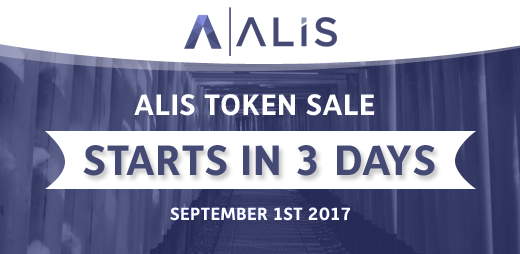
<style>
.page{position:relative;width:520px;height:254px;background:#ffffff}
.page>*{position:absolute;margin:0}
.t1{font:30px "Depot-Bold";letter-spacing:0.02em;color:#ffffff;text-transform:uppercase}
.t2{font:43px "Depot-Bold";letter-spacing:0.02em;color:#454a75;text-transform:uppercase}
.t3{font:18px "Depot-Bold";letter-spacing:0.02em;color:#ffffff;text-transform:uppercase}
</style>
<div class="page">
<p class="t1" style="left:134px;top:94px;width:241px;height:22px">Alis Token Sale</p>
<p class="t2" style="left:83px;top:145px;width:352px;height:31px">Starts in 3 Days</p>
<p class="t3" style="left:170px;top:207px;width:181px;height:14px">September 1st 2017</p>
</div>
